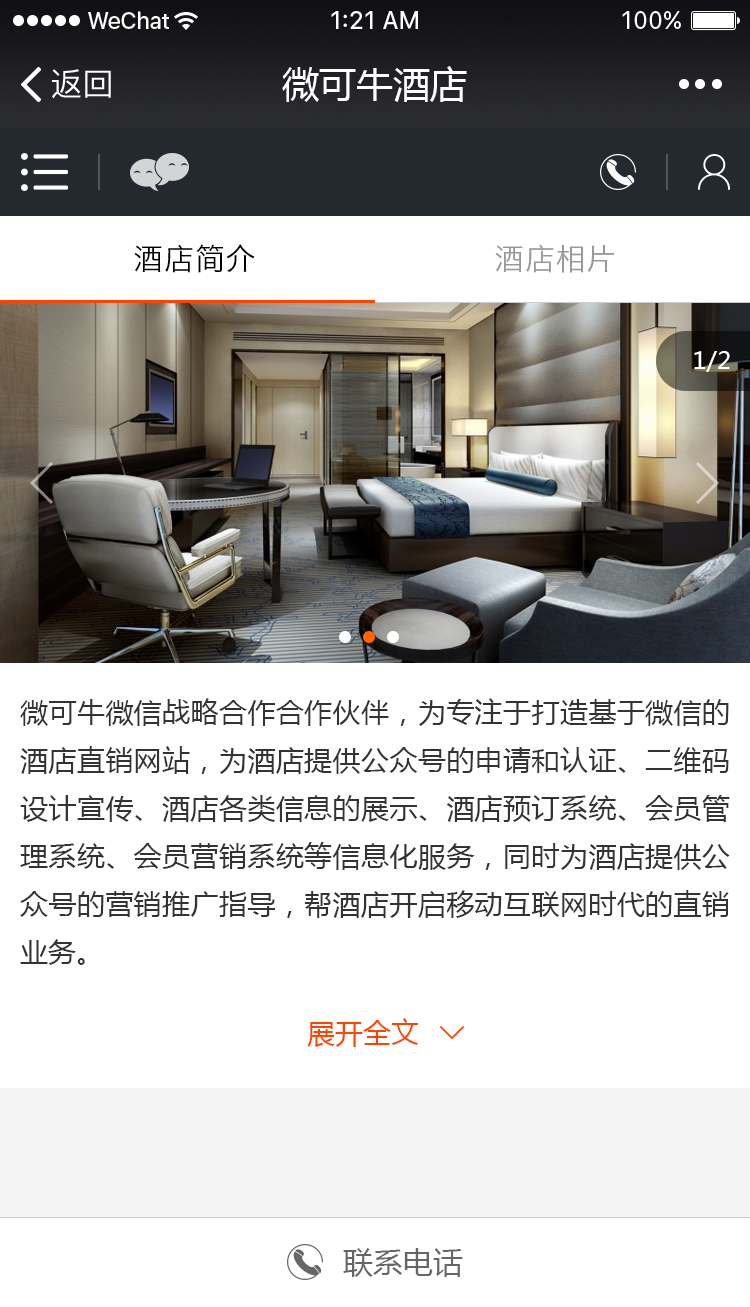
<style>
.page{position:relative;width:750px;height:1307px;background:#ffffff}
.page>*{position:absolute;margin:0}
.t1{font:32px "PingFangSC-Regular";color:#ffffff}
.t2{font:37px "MicrosoftYaHei";color:#ffffff}
.t3{font:30px "HiraginoSansGB-W3";letter-spacing:0.03em;color:#000000}
.t4{font:30px "HiraginoSansGB-W3";letter-spacing:0.03em;color:#999999}
.t5{font:24px "MicrosoftYaHei";color:#ffffff}
.t6{font:28px/48px "MicrosoftYaHei";color:#333333}
.t7{font:28px "MicrosoftYaHei";color:#ff4400}
.t8{font:30px "MicrosoftYaHei";color:#666666}
</style>
<div class="page">
<p class="t1" style="left:52px;top:69px;width:59px;height:30px">返回</p>
<p class="t2" style="left:282px;top:66px;width:185px;height:36px">微可牛酒店</p>
<p class="t3" style="left:134px;top:244px;width:121px;height:29px">酒店简介</p>
<p class="t4" style="left:495px;top:244px;width:119px;height:29px">酒店相片</p>
<p class="t5" style="left:694px;top:351px;width:36px;height:21px">1/2</p>
<p class="t6" style="left:20px;top:698px;width:710px;height:267px;text-align:justify">微可牛微信战略合作合作伙伴，为专注于打造基于微信的酒店直销网站，为酒店提供公众号的申请和认证、二维码设计宣传、酒店各类信息的展示、酒店预订系统、会员管理系统、会员营销系统等信息化服务，同时为酒店提供公众号的营销推广指导，帮酒店开启移动互联网时代的直销业务。</p>
<p class="t7" style="left:307px;top:1018px;width:112px;height:29px">展开全文</p>
<p class="t8" style="left:343px;top:1248px;width:120px;height:29px">联系电话</p>
</div>
